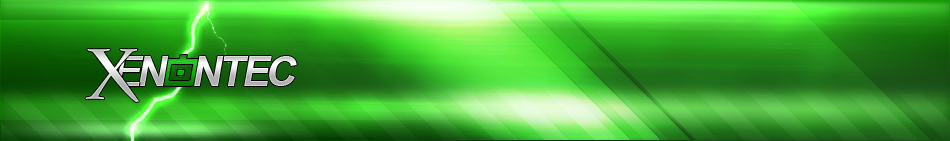
<style>
.page{position:relative;width:950px;height:141px}
.page>*{position:absolute;margin:0}
.t1{font:72px "CharlemagneStd-Bold"}
.t2{font:42px "Arial-BoldMT";font-style:italic}
</style>
<div class="page">
<p class="t1" style="left:85px;top:49px;width:54px;height:53px">X</p>
<p class="t2" style="left:139px;top:56px;width:30px;height:30px">N</p>
<p class="t2" style="left:194px;top:56px;width:30px;height:30px">N</p>
<p class="t2" style="left:223px;top:56px;width:26px;height:30px">T</p>
<p class="t2" style="left:244px;top:56px;width:28px;height:30px">E</p>
<p class="t2" style="left:269px;top:56px;width:28px;height:30px">C</p>
</div>
